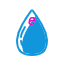
<style>
.page{position:relative;width:64px;height:64px;background:#ffffff}
.page>*{position:absolute;margin:0}
.t1{font:14px "JetBrainsMono-BoldItalic";color:#d815c3}
</style>
<div class="page">
<p class="t1" style="left:28px;top:17px;width:8px;height:8px">e</p>
</div>
